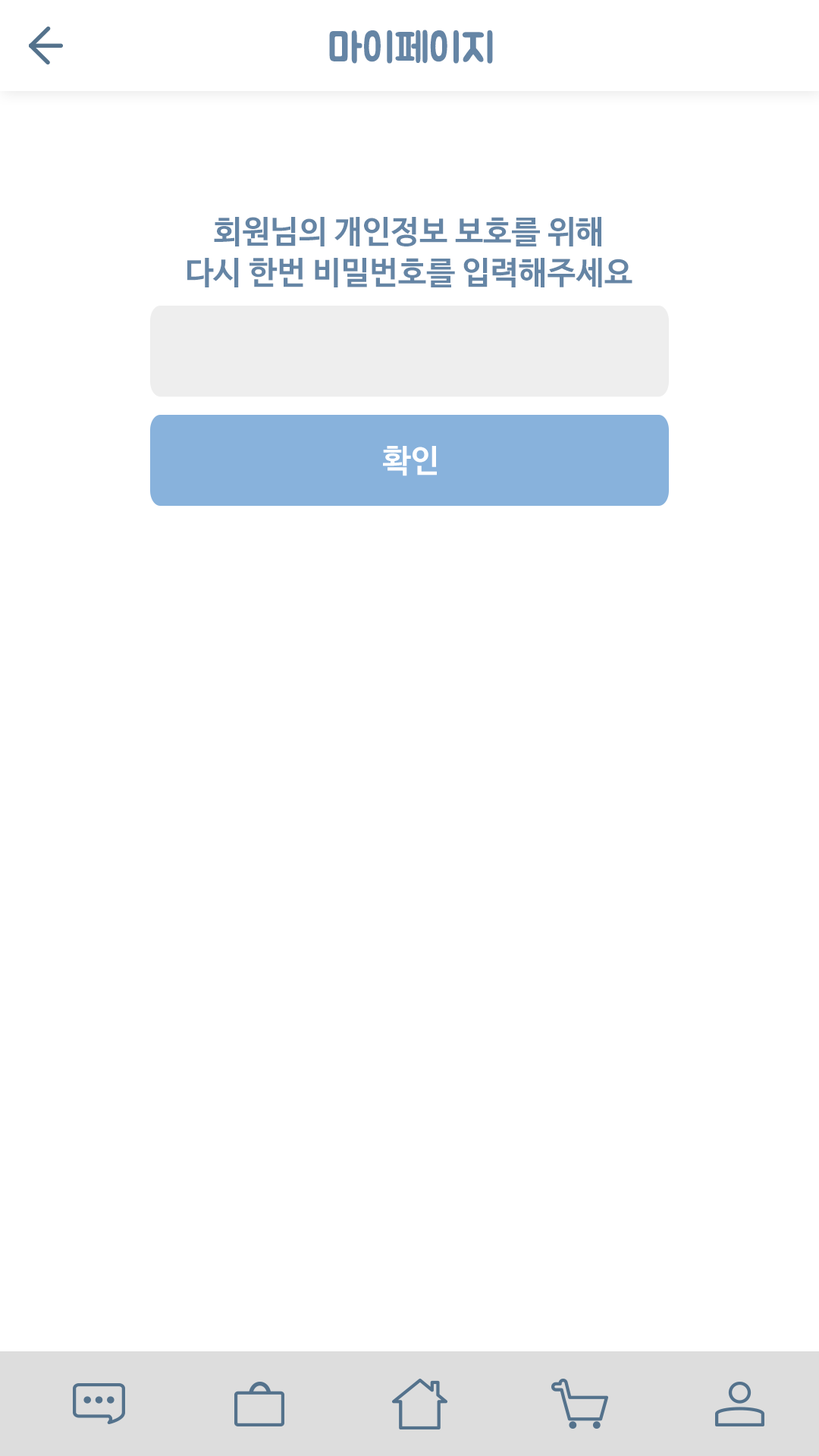
<style>
.page{position:relative;width:819px;height:1456px;background:#ffffff}
.page>*{position:absolute;margin:0}
.t1{font:40.9px "BMJUA";color:#6585a5}
.t2{font:31.8px/40.9px "NanumBarunGothicBold";color:#6585a5}
.t3{font:31.8px "NanumBarunGothicBold";color:#ffffff}
</style>
<div class="page">
<p class="t1" style="left:329px;top:30px;width:164px;height:34px">마이페이지</p>
<p class="t2" style="left:187px;top:217px;width:445px;height:70px;text-align:center">회원님의 개인정보 보호를 위해<br>다시 한번 비밀번호를 입력해주세요</p>
<p class="t3" style="left:383px;top:446px;width:54px;height:30px">확인</p>
</div>
